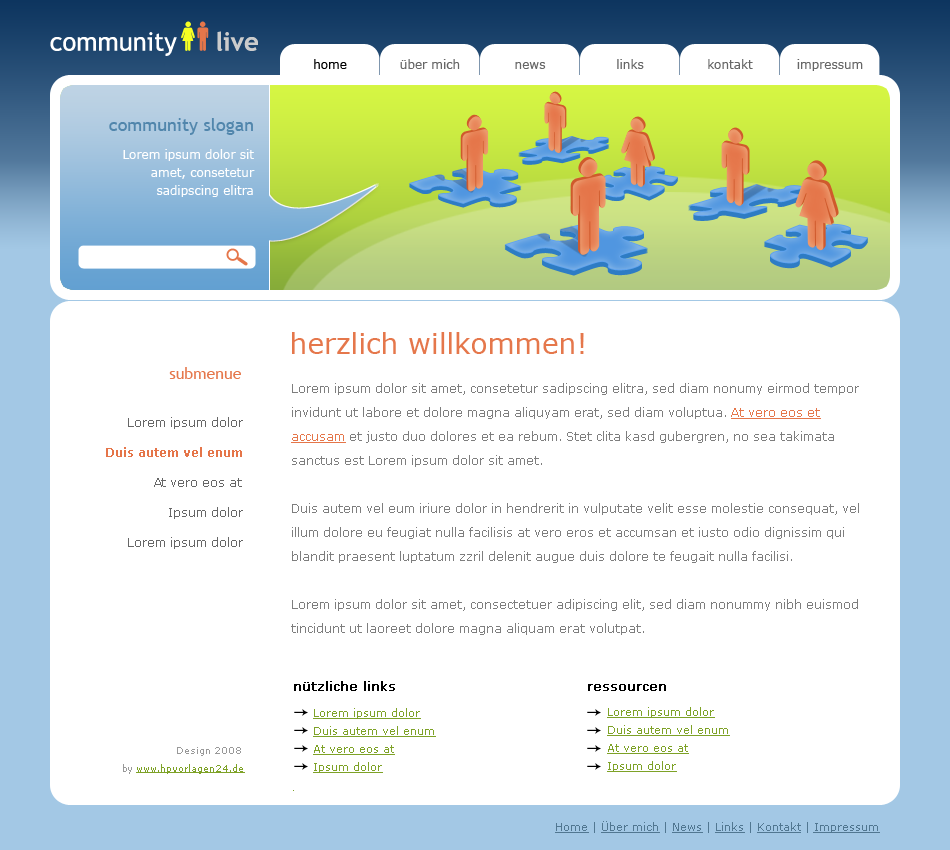
<style>
.page{position:relative;width:950px;height:850px;background:#ffffff}
.page>*{position:absolute;margin:0}
.t1{font:25.6px "TrebuchetMS";color:#ffffff}
.t2{font:25.6px "TrebuchetMS-Bold";color:#cccccc}
.t3{font:12px "Verdana";color:#000000}
.t4{font:12px "Verdana";color:#666666}
.t5{font:28px "Verdana";color:#e5774b}
.t6{font:16px "TrebuchetMS";color:#e5774b}
.t7{font:12px/24px "Verdana";color:#7e7e7e}
.t8{font:12px/24px "Verdana";color:#e5764a;text-decoration:underline}
.t9{font:12px/30px "Verdana";color:#666666}
.t10{font:12px/30px "Verdana-Bold";color:#e57549}
.t11{font:11px/18px "Verdana";color:#7ea227;text-decoration:underline}
.t12{font:12px/18px "Verdana";color:#000000;font-weight:bold}
.t13{font:9px/18px "Verdana";color:#7ea227;text-decoration:underline}
.t14{font:9px/18px "Verdana";color:#999999}
.t15{font:11px "Verdana";color:#517791;text-decoration:underline}
.t16{font:11px "Verdana";color:#517791}
</style>
<div class="page">
<p class="t1" style="left:50px;top:31px;width:208px;height:25px">community     <span class="t2">live</span></p>
<p class="t3" style="left:314px;top:59px;width:33px;height:10px">home</p>
<p class="t4" style="left:400px;top:59px;width:60px;height:10px">über mich</p>
<p class="t4" style="left:515px;top:62px;width:31px;height:7px">news</p>
<p class="t4" style="left:617px;top:59px;width:27px;height:10px">links</p>
<p class="t4" style="left:708px;top:59px;width:45px;height:10px">kontakt</p>
<p class="t4" style="left:797px;top:59px;width:66px;height:12px">impressum</p>
<p class="t5" style="left:292px;top:332px;width:292px;height:22px">herzlich willkommen!</p>
<p class="t6" style="left:169px;top:367px;width:72px;height:12px">submenue</p>
<p class="t7" style="left:291px;top:383px;width:568px;height:252px">Lorem ipsum dolor sit amet, consetetur sadipscing elitra, sed diam nonumy eirmod tempor invidunt ut labore et dolore magna aliquyam erat, sed diam voluptua. <span class="t8">At vero eos et accusam</span> et justo duo dolores et ea rebum. Stet clita kasd gubergren, no sea takimata sanctus est Lorem ipsum dolor sit amet. <br><br>Duis autem vel eum iriure dolor in hendrerit in vulputate velit esse molestie consequat, vel illum dolore eu feugiat nulla facilisis at vero eros et accumsan et iusto odio dignissim qui blandit praesent luptatum zzril delenit augue duis dolore te feugait nulla facilisi. <br><br>Lorem ipsum dolor sit amet, consectetuer adipiscing elit, sed diam nonummy nibh euismod tincidunt ut laoreet dolore magna aliquam erat volutpat.</p>
<p class="t9" style="left:106px;top:417px;width:137px;height:132px;text-align:right">Lorem ipsum dolor<br><span class="t10">Duis autem vel enum<br></span>At vero eos at<br>Ipsum dolor<br>Lorem ipsum dolor</p>
<p class="t11" style="left:293px;top:681px;width:143px;height:110px"><span class="t12">nützliche links<br></span>Lorem ipsum dolor<br>Duis autem vel enum<br>At vero eos at<br>Ipsum dolor</p>
<p class="t11" style="left:588px;top:684px;width:142px;height:88px"><span class="t12">ressourcen<br></span>Lorem ipsum dolor<br>Duis autem vel enum<br>At vero eos at<br>Ipsum dolor</p>
<p class="t13" style="left:123px;top:747px;width:122px;height:27px;text-align:right"><span class="t14">Design 2008 <br>by </span>www.hpvorlagen24.de</p>
<p class="t15" style="left:555px;top:821px;width:325px;height:12px">Home<span class="t16"> | </span>Über mich<span class="t16"> | </span>News<span class="t16"> | </span>Links<span class="t16"> | </span>Kontakt<span class="t16"> | </span>Impressum</p>
</div>
